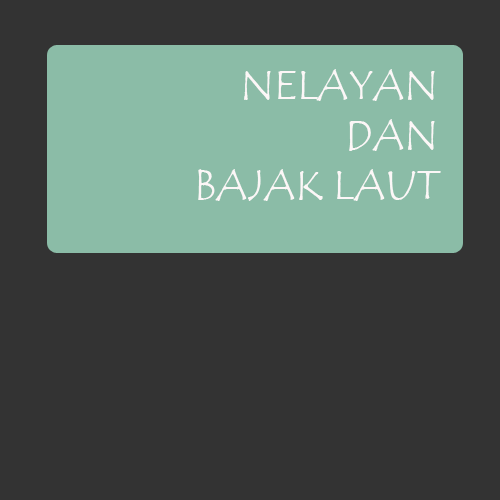
<style>
.page{position:relative;width:500px;height:500px;background:#333333}
.page>*{position:absolute;margin:0}
.t1{font:41.7px "TempusSansITC";color:#fcf7f7}
</style>
<div class="page">
<p class="t1" style="left:198px;top:69px;width:243px;height:132px;text-align:right">NELAYAN<br>DAN<br>BAJAK LAUT</p>
</div>
